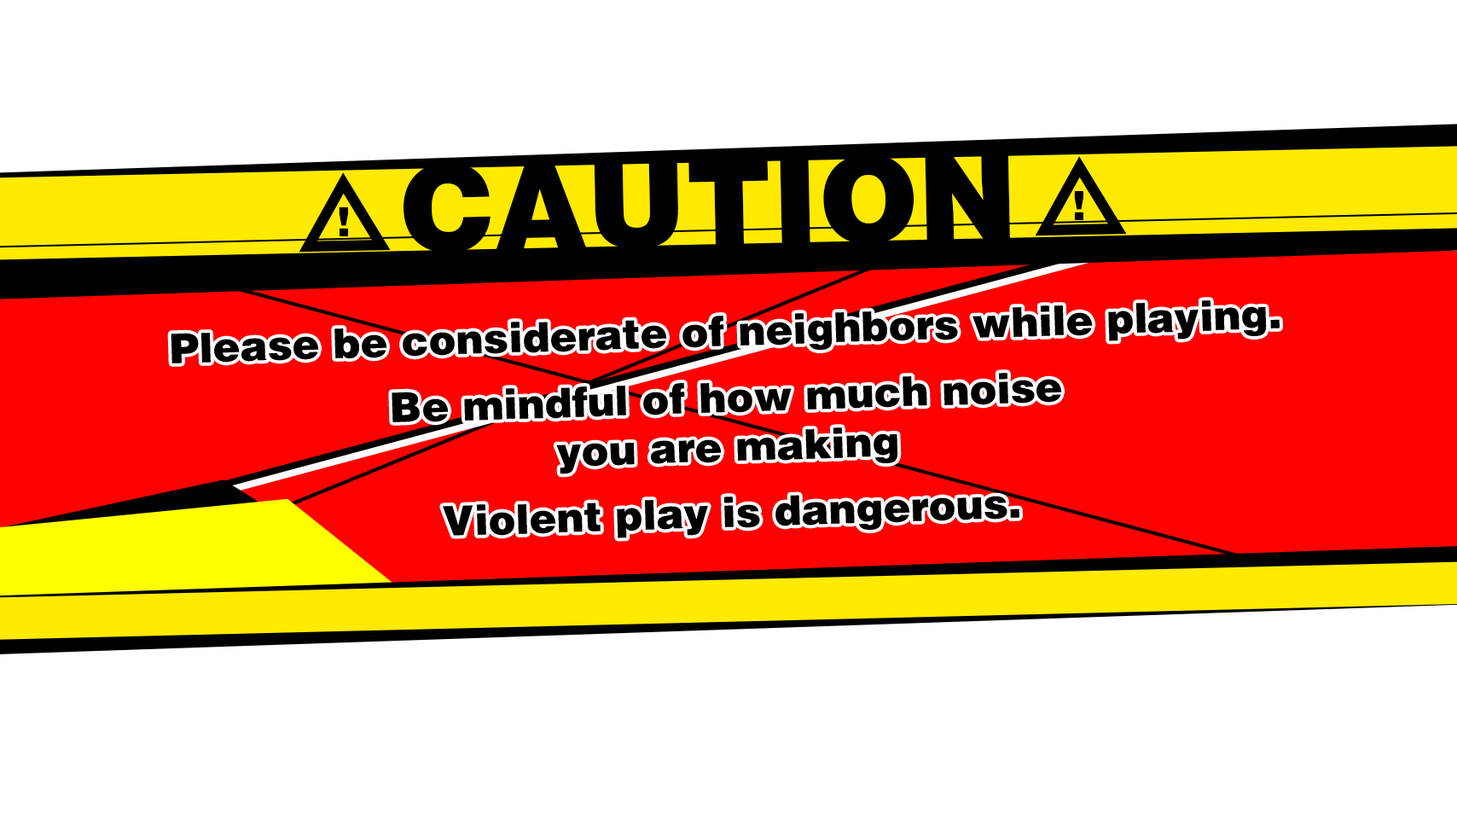
<style>
.page{position:relative;width:1457px;height:819px;background:#ffffff}
.page>*{position:absolute;margin:0}
.t1{font:119.4px "HelveticaLTStd-Blk";color:#000000}
.t2{font:40.9px "HelveticaLTStd-Blk";color:#000000}
</style>
<div class="page">
<p class="t1" style="left:403px;top:153px;width:607px;height:100px;rotate:-1deg">CAUTION</p>
<p class="t2" style="left:1074px;top:191px;width:9px;height:29px">!</p>
<p class="t2" style="left:339px;top:207px;width:9px;height:29px">!</p>
<p class="t2" style="left:171px;top:300px;width:1108px;height:63px;rotate:-2deg">Please be considerate of neighbors while playing.</p>
<p class="t2" style="left:391px;top:373px;width:671px;height:101px;text-align:center;rotate:-2deg">Be mindful of how much noise<br>you are making</p>
<p class="t2" style="left:443px;top:495px;width:576px;height:43px;rotate:-2deg">Violent play is dangerous.</p>
</div>
